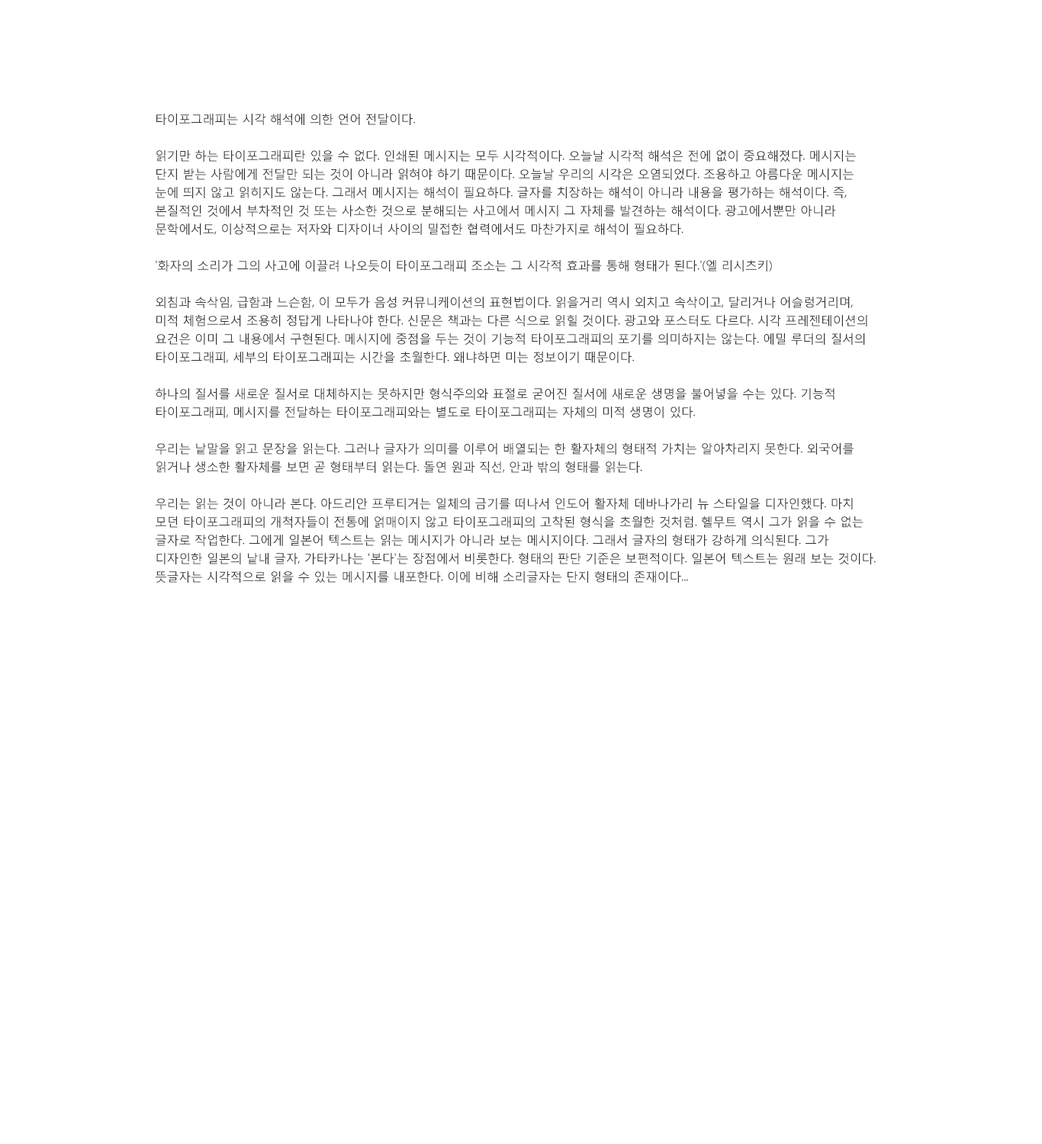
<style>
.page{position:relative;width:1042px;height:1144px;background:#ffffff}
.page>*{position:absolute;margin:0}
.t1{font:12.2px/18.3px "MalgunGothicRegular";letter-spacing:-0.025em;color:#333333}
</style>
<div class="page">
<p class="t1" style="left:156px;top:114px;width:720px;height:469px">타이포그래피는 시각 해석에 의한 언어 전달이다.<br><br>읽기만 하는 타이포그래피란 있을 수 없다. 인쇄된 메시지는 모두 시각적이다. 오늘날 시각적 해석은 전에 없이 중요해졌다. 메시지는 단지 받는 사람에게 전달만 되는 것이 아니라 읽혀야 하기 때문이다. 오늘날 우리의 시각은 오염되었다. 조용하고 아름다운 메시지는 눈에 띄지 않고 읽히지도 않는다. 그래서 메시지는 해석이 필요하다. 글자를 치장하는 해석이 아니라 내용을 평가하는 해석이다. 즉, 본질적인 것에서 부차적인 것 또는 사소한 것으로 분해되는 사고에서 메시지 그 자체를 발견하는 해석이다. 광고에서뿐만 아니라 문학에서도, 이상적으로는 저자와 디자이너 사이의 밀접한 협력에서도 마찬가지로 해석이 필요하다.<br>'화자의 소리가 그의 사고에 이끌려 나오듯이 타이포그래피 조소는 그 시각적 효과를 통해 형태가 된다.'(엘 리시츠키)<br>외침과 속삭임, 급함과 느슨함, 이 모두가 음성 커뮤니케이션의 표현법이다. 읽을거리 역시 외치고 속삭이고, 달리거나 어슬렁거리며, 미적 체험으로서 조용히 정답게 나타나야 한다. 신문은 책과는 다른 식으로 읽힐 것이다. 광고와 포스터도 다르다. 시각 프레젠테이션의 요건은 이미 그 내용에서 구현된다. 메시지에 중점을 두는 것이 기능적 타이포그래피의 포기를 의미하지는 않는다. 에밀 루더의 질서의 타이포그래피, 세부의 타이포그래피는 시간을 초월한다. 왜냐하면 미는 정보이기 때문이다.<br>하나의 질서를 새로운 질서로 대체하지는 못하지만 형식주의와 표절로 굳어진 질서에 새로운 생명을 불어넣을 수는 있다. 기능적 타이포그래피, 메시지를 전달하는 타이포그래피와는 별도로 타이포그래피는 자체의 미적 생명이 있다.<br>우리는 낱말을 읽고 문장을 읽는다. 그러나 글자가 의미를 이루어 배열되는 한 활자체의 형태적 가치는 알아차리지 못한다. 외국어를 읽거나 생소한 활자체를 보면 곧 형태부터 읽는다. 돌연 원과 직선, 안과 밖의 형태를 읽는다.<br>우리는 읽는 것이 아니라 본다. 아드리안 프루티거는 일체의 금기를 떠나서 인도어 활자체 데바나가리 뉴 스타일을 디자인했다. 마치 모던 타이포그래피의 개척자들이 전통에 얽매이지 않고 타이포그래피의 고착된 형식을 초월한 것처럼. 헬무트 역시 그가 읽을 수 없는 글자로 작업한다. 그에게 일본어 텍스트는 읽는 메시지가 아니라 보는 메시지이다. 그래서 글자의 형태가 강하게 의식된다. 그가 디자인한 일본의 낱내 글자, 가타카나는 '본다'는 장점에서 비롯한다. 형태의 판단 기준은 보편적이다. 일본어 텍스트는 원래 보는 것이다. 뜻글자는 시각적으로 읽을 수 있는 메시지를 내포한다. 이에 비해 소리글자는 단지 형태의 존재이다...</p>
</div>
